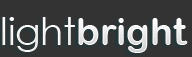
<style>
.page{position:relative;width:192px;height:57px;background:#333333}
.page>*{position:absolute;margin:0}
.t1{font:37.7px "ArialRoundedMTBold";color:#ffffff}
.t2{font:37.7px "CenturyGothic";color:#ffffff}
</style>
<div class="page">
<p class="t1" style="left:2px;top:17px;width:186px;height:36px"><span class="t2">light</span>bright</p>
</div>
